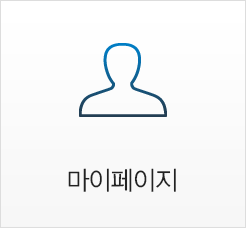
<style>
.page{position:relative;width:246px;height:228px}
.page>*{position:absolute;margin:0}
.t1{font:26px "YDVYGO32";letter-spacing:-0.025em;color:#222222;scale:0.96 1}
</style>
<div class="page">
<p class="t1" style="left:68px;top:168px;width:108px;height:24px">마이페이지</p>
</div>
